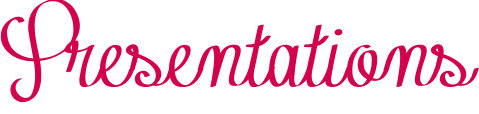
<style>
.page{position:relative;width:479px;height:114px;background:#ffffff}
.page>*{position:absolute;margin:0}
.t1{font:108.3px "Contribute_FREE-version";color:#d3004c}
</style>
<div class="page">
<p class="t1" style="left:0px;top:0px;width:479px;height:103px">Presentations</p>
</div>
